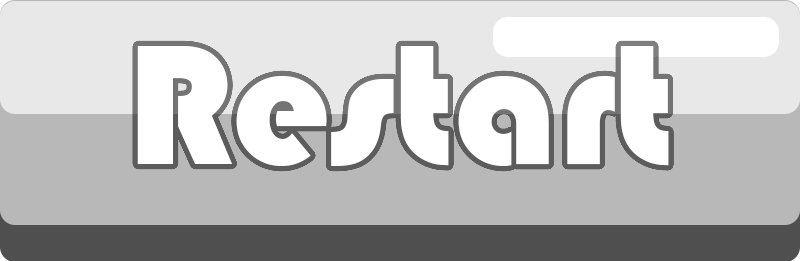
<style>
.page{position:relative;width:800px;height:261px;background:#b8b8b8}
.page>*{position:absolute;margin:0}
.t1{font:177px "Bauhaus93";color:#ffffff}
</style>
<div class="page">
<p class="t1" style="left:137px;top:46px;width:532px;height:120px">Restart</p>
</div>
